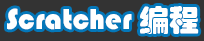
<style>
.page{position:relative;width:204px;height:41px;background:#333333}
.page>*{position:absolute;margin:0}
.t1{font:30px "STHupo";color:#ffffff}
</style>
<div class="page">
<p class="t1" style="left:7px;top:6px;width:192px;height:28px">Scratcher编程</p>
</div>
